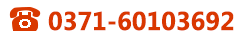
<style>
.page{position:relative;width:235px;height:37px;background:#ffffff}
.page>*{position:absolute;margin:0}
.t1{font:24px "MicrosoftYaHei-Bold";color:#d93700}
</style>
<div class="page">
<p class="t1" style="left:48px;top:11px;width:186px;height:20px">0371-60103692</p>
</div>
